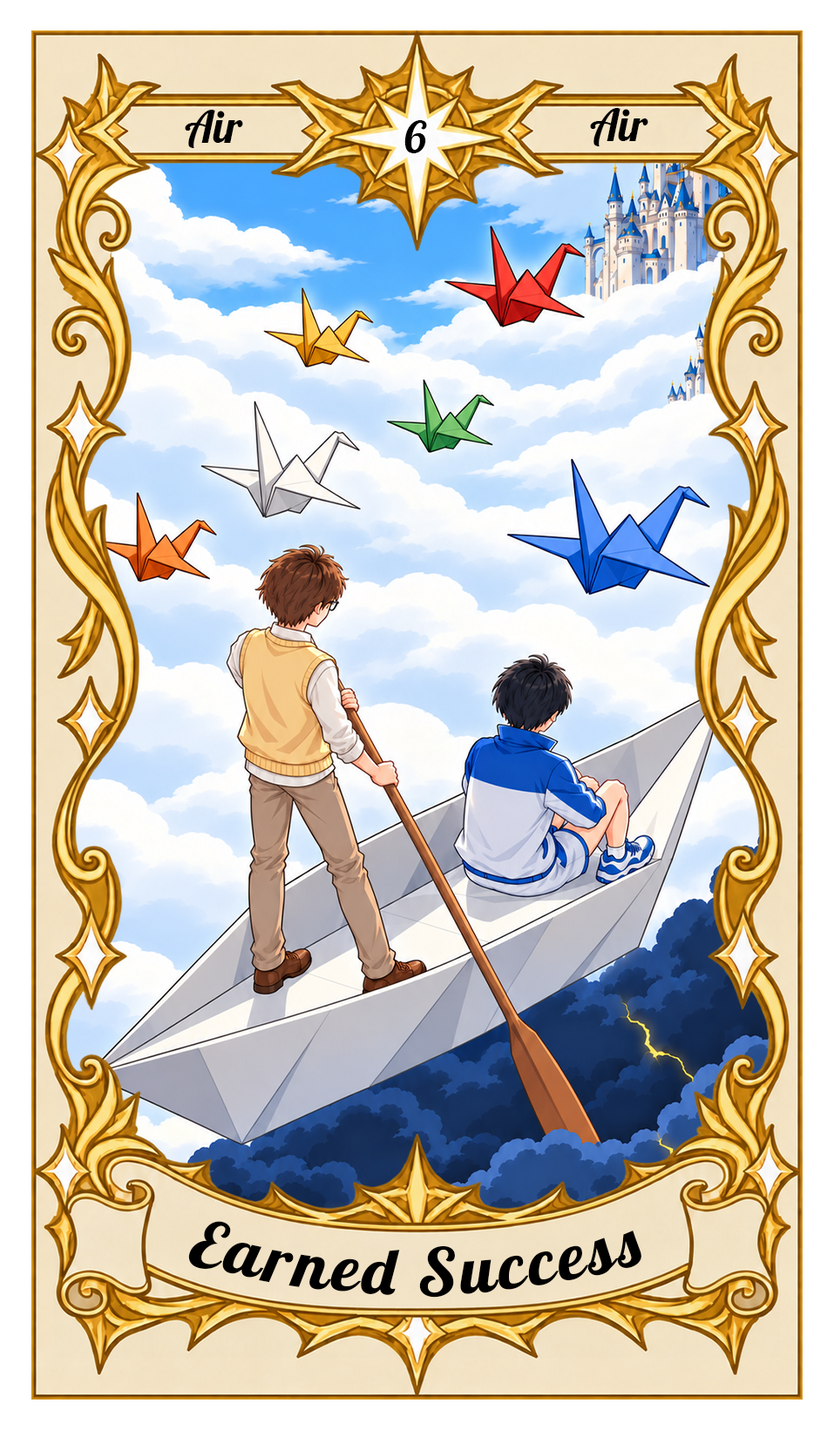
<style>
.page{position:relative;width:834px;height:1430px}
.page>*{position:absolute;margin:0}
.t1{font:43.6px "Lobster-Regular";color:#000000}
.t2{font:65.3px "Lobster-Regular";letter-spacing:0.05em;color:#000000}
</style>
<div class="page">
<p class="t1" style="left:185px;top:110px;width:58px;height:38px">Air</p>
<p class="t1" style="left:590px;top:108px;width:58px;height:38px">Air</p>
<p class="t1" style="left:404px;top:120px;width:23px;height:33px">6</p>
<p class="t2" style="left:188px;top:1221px;width:453px;height:77px">Earned Success</p>
</div>
